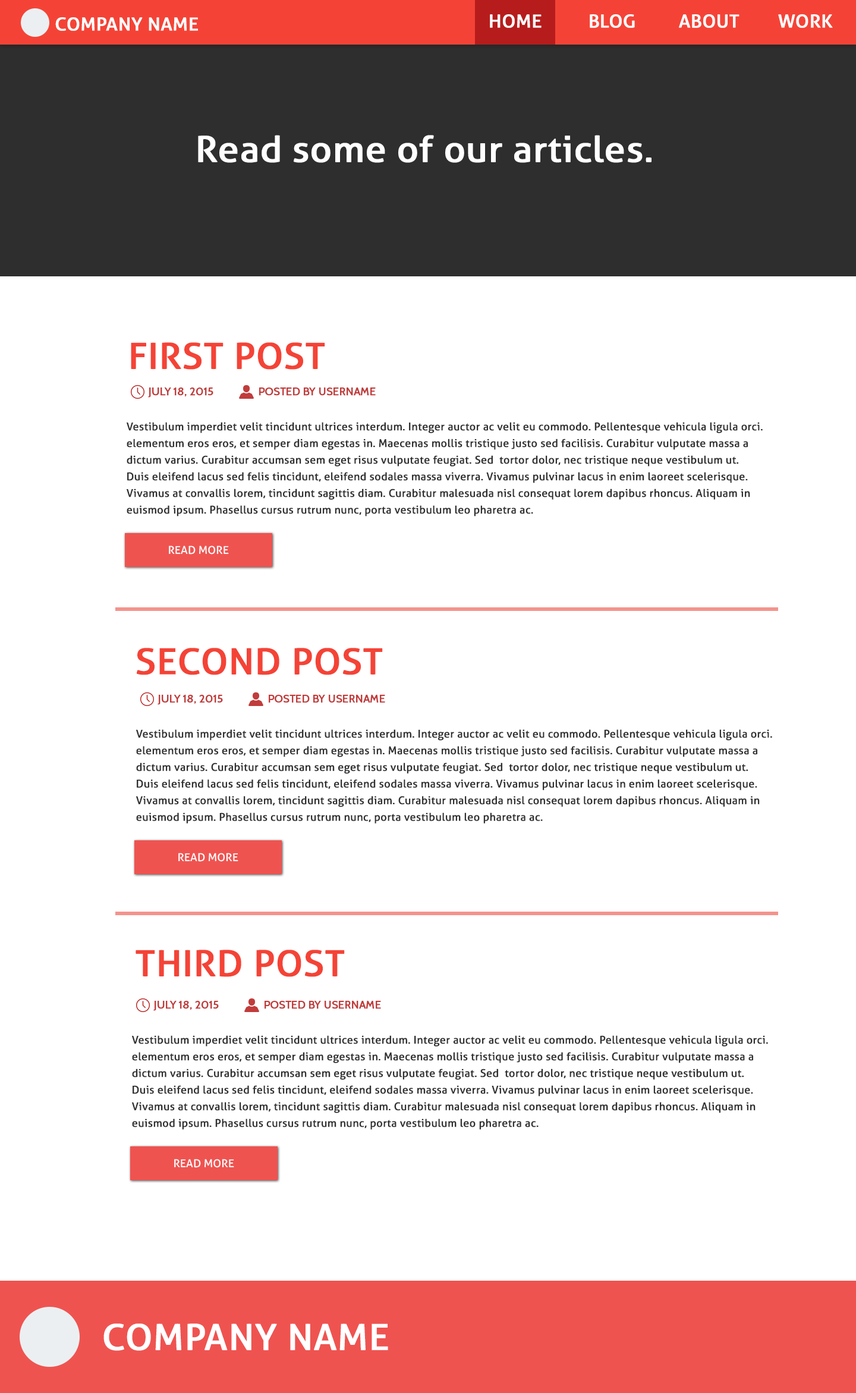
<style>
.page{position:relative;width:856px;height:1393px;background:#ffffff}
.page>*{position:absolute;margin:0}
.t1{font:17.8px "Aller";color:#ffffff;font-weight:bold;scale:1.04 1}
.t2{font:35.7px "Aller";color:#ffffff;font-weight:bold;scale:1.04 1}
.t3{font:35.7px "Aller";color:#f44336;font-weight:bold;scale:1.04 1}
.t4{font:10.7px "Cabin-Regular";color:#c13c3c;font-weight:bold}
.t5{font:10.7px/16.6px "Aller";color:#313131;font-weight:bold}
.t6{font:10.8px "Aller";color:#ffffff;text-transform:uppercase;scale:1.05 1}
</style>
<div class="page">
<p class="t1" style="left:55px;top:17px;width:143px;height:14px">COMPANY NAME</p>
<p class="t1" style="left:490px;top:14px;width:51px;height:14px">HOME</p>
<p class="t1" style="left:590px;top:14px;width:45px;height:14px">BLOG</p>
<p class="t1" style="left:679px;top:14px;width:60px;height:14px">ABOUT</p>
<p class="t1" style="left:778px;top:14px;width:55px;height:14px">WORK</p>
<p class="t2" style="left:198px;top:135px;width:453px;height:28px">Read some of our articles.</p>
<p class="t3" style="left:131px;top:342px;width:194px;height:28px">FIRST POST</p>
<p class="t4" style="left:148px;top:388px;width:65px;height:10px">JULY 18, 2015</p>
<p class="t4" style="left:259px;top:388px;width:117px;height:8px">POSTED BY USERNAME</p>
<p class="t5" style="left:127px;top:422px;width:636px;height:95px">Vestibulum imperdiet velit tincidunt ultrices interdum. Integer auctor ac velit eu commodo. Pellentesque vehicula ligula orci.<br>elementum eros eros, et semper diam egestas in. Maecenas mollis tristique justo sed facilisis. Curabitur vulputate massa a <br>dictum varius. Curabitur accumsan sem eget risus vulputate feugiat. Sed  tortor dolor, nec tristique neque vestibulum ut. <br>Duis eleifend lacus sed felis tincidunt, eleifend sodales massa viverra. Vivamus pulvinar lacus in enim laoreet scelerisque. <br>Vivamus at convallis lorem, tincidunt sagittis diam. Curabitur malesuada nisl consequat lorem dapibus rhoncus. Aliquam in <br>euismod ipsum. Phasellus cursus rutrum nunc, porta vestibulum leo pharetra ac.</p>
<p class="t6" style="left:169px;top:546px;width:60px;height:9px">Read More</p>
<p class="t3" style="left:137px;top:648px;width:246px;height:27px">SECOND POST</p>
<p class="t4" style="left:158px;top:695px;width:65px;height:10px">JULY 18, 2015</p>
<p class="t4" style="left:269px;top:695px;width:116px;height:8px">POSTED BY USERNAME</p>
<p class="t5" style="left:136px;top:729px;width:636px;height:95px">Vestibulum imperdiet velit tincidunt ultrices interdum. Integer auctor ac velit eu commodo. Pellentesque vehicula ligula orci.<br>elementum eros eros, et semper diam egestas in. Maecenas mollis tristique justo sed facilisis. Curabitur vulputate massa a <br>dictum varius. Curabitur accumsan sem eget risus vulputate feugiat. Sed  tortor dolor, nec tristique neque vestibulum ut. <br>Duis eleifend lacus sed felis tincidunt, eleifend sodales massa viverra. Vivamus pulvinar lacus in enim laoreet scelerisque. <br>Vivamus at convallis lorem, tincidunt sagittis diam. Curabitur malesuada nisl consequat lorem dapibus rhoncus. Aliquam in <br>euismod ipsum. Phasellus cursus rutrum nunc, porta vestibulum leo pharetra ac.</p>
<p class="t6" style="left:178px;top:853px;width:60px;height:9px">Read More</p>
<p class="t3" style="left:136px;top:950px;width:209px;height:27px">THIRD POST</p>
<p class="t4" style="left:153px;top:1001px;width:66px;height:10px">JULY 18, 2015</p>
<p class="t4" style="left:264px;top:1001px;width:117px;height:8px">POSTED BY USERNAME</p>
<p class="t5" style="left:132px;top:1035px;width:636px;height:95px">Vestibulum imperdiet velit tincidunt ultrices interdum. Integer auctor ac velit eu commodo. Pellentesque vehicula ligula orci.<br>elementum eros eros, et semper diam egestas in. Maecenas mollis tristique justo sed facilisis. Curabitur vulputate massa a <br>dictum varius. Curabitur accumsan sem eget risus vulputate feugiat. Sed  tortor dolor, nec tristique neque vestibulum ut. <br>Duis eleifend lacus sed felis tincidunt, eleifend sodales massa viverra. Vivamus pulvinar lacus in enim laoreet scelerisque. <br>Vivamus at convallis lorem, tincidunt sagittis diam. Curabitur malesuada nisl consequat lorem dapibus rhoncus. Aliquam in <br>euismod ipsum. Phasellus cursus rutrum nunc, porta vestibulum leo pharetra ac.</p>
<p class="t6" style="left:174px;top:1159px;width:60px;height:9px">Read More</p>
<p class="t2" style="left:103px;top:1324px;width:285px;height:27px">COMPANY NAME</p>
</div>
